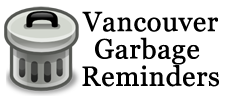
<style>
.page{position:relative;width:227px;height:100px;background:#ffffff}
.page>*{position:absolute;margin:0}
.t1{font:27.3px/27.3px "Georgia";color:#000000;font-weight:bold}
</style>
<div class="page">
<p class="t1" style="left:82px;top:11px;width:137px;height:76px;text-align:center">Vancouver<br>Garbage <br>Reminders</p>
</div>
